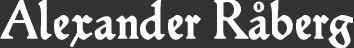
<style>
.page{position:relative;width:354px;height:48px;background:#333333}
.page>*{position:absolute;margin:0}
.t1{font:54.2px "Hamlet-Tertia18";color:#ffffff;font-weight:bold}
</style>
<div class="page">
<p class="t1" style="left:0px;top:0px;width:353px;height:49px">Alexander Raberg</p>
</div>
